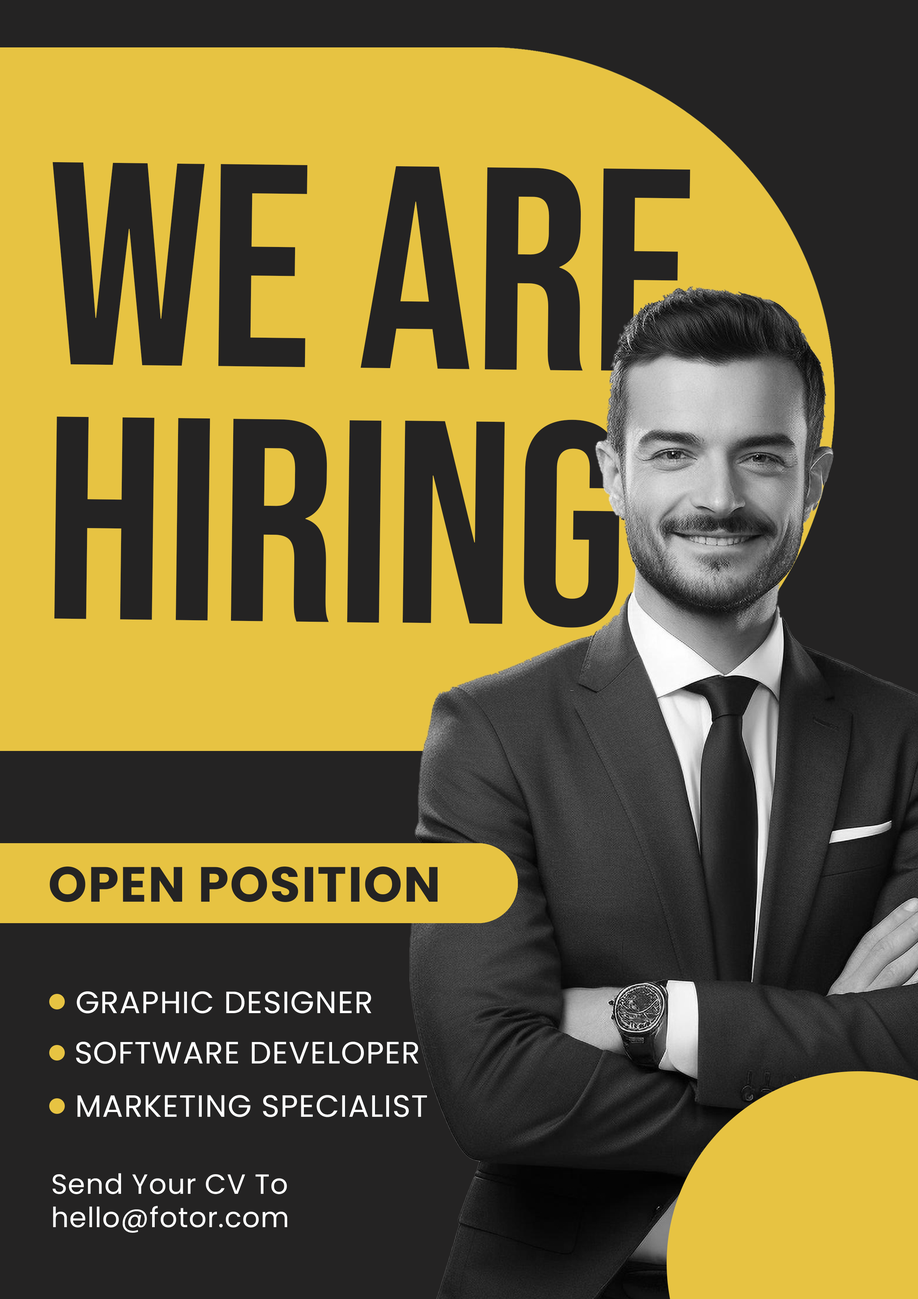
<style>
.page{position:relative;width:918px;height:1299px;background:#242323}
.page>*{position:absolute;margin:0}
.t1{font:288.5px/254.5px "BebasNeue-Regular";color:#242323;text-transform:uppercase}
.t2{font:49.4px "Poppins-Bold";letter-spacing:0.025em;color:#242323;text-transform:uppercase}
.t3{font:30.9px "Poppins-Regular";letter-spacing:0.025em;color:#ffffff;text-transform:uppercase}
.t4{font:27.8px "Poppins-Regular";letter-spacing:0.025em;color:#ffffff}
.t5{font:27.8px "Poppins-Regular";letter-spacing:0.025em;color:#ffffff;font-variant:small-caps}
</style>
<div class="page">
<p class="t1" style="left:53px;top:162px;width:637px;height:466px;rotate:1deg">We ARE <br>Hiring</p>
<p class="t2" style="left:50px;top:866px;width:388px;height:36px">OpEN POsITION</p>
<p class="t3" style="left:77px;top:991px;width:294px;height:22px">Graphic Designer</p>
<p class="t3" style="left:76px;top:1041px;width:342px;height:23px">Software Developer</p>
<p class="t3" style="left:77px;top:1095px;width:350px;height:22px">Marketing Specialist</p>
<p class="t4" style="left:53px;top:1173px;width:234px;height:59px"><span class="t5">S</span>end Your CV To<br>hello@fotor.com</p>
</div>
